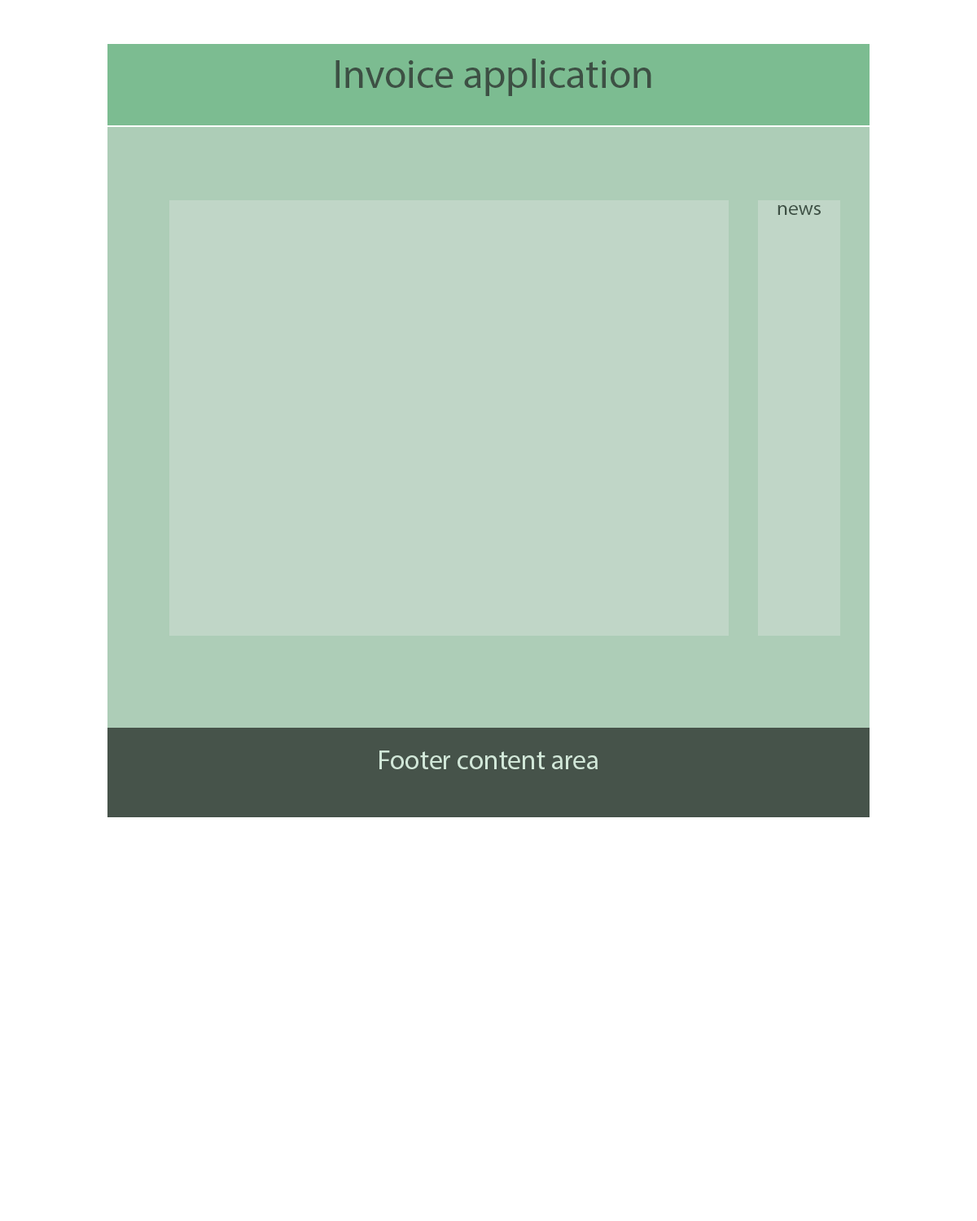
<style>
.page{position:relative;width:977px;height:1221px;background:#ffffff}
.page>*{position:absolute;margin:0}
.t1{font:9.8px "MyriadPro-Regular";color:#3d5044}
.t2{font:20.3px "MyriadPro-Regular";color:#3d5044}
.t3{font:27.1px "MyriadPro-Regular";color:#d1e7d8}
</style>
<div class="page">
<p class="t1" style="left:335px;top:59px;width:316px;height:37px">Invoice application</p>
<p class="t2" style="left:777px;top:205px;width:43px;height:10px">news</p>
<p class="t3" style="left:379px;top:750px;width:218px;height:19px">Footer content area</p>
</div>
